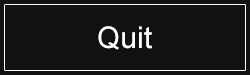
<style>
.page{position:relative;width:250px;height:75px;background:#111111}
.page>*{position:absolute;margin:0}
.t1{font:30px "ArialMT";color:#ffffff}
</style>
<div class="page">
<p class="t1" style="left:98px;top:26px;width:54px;height:24px">Quit</p>
</div>
